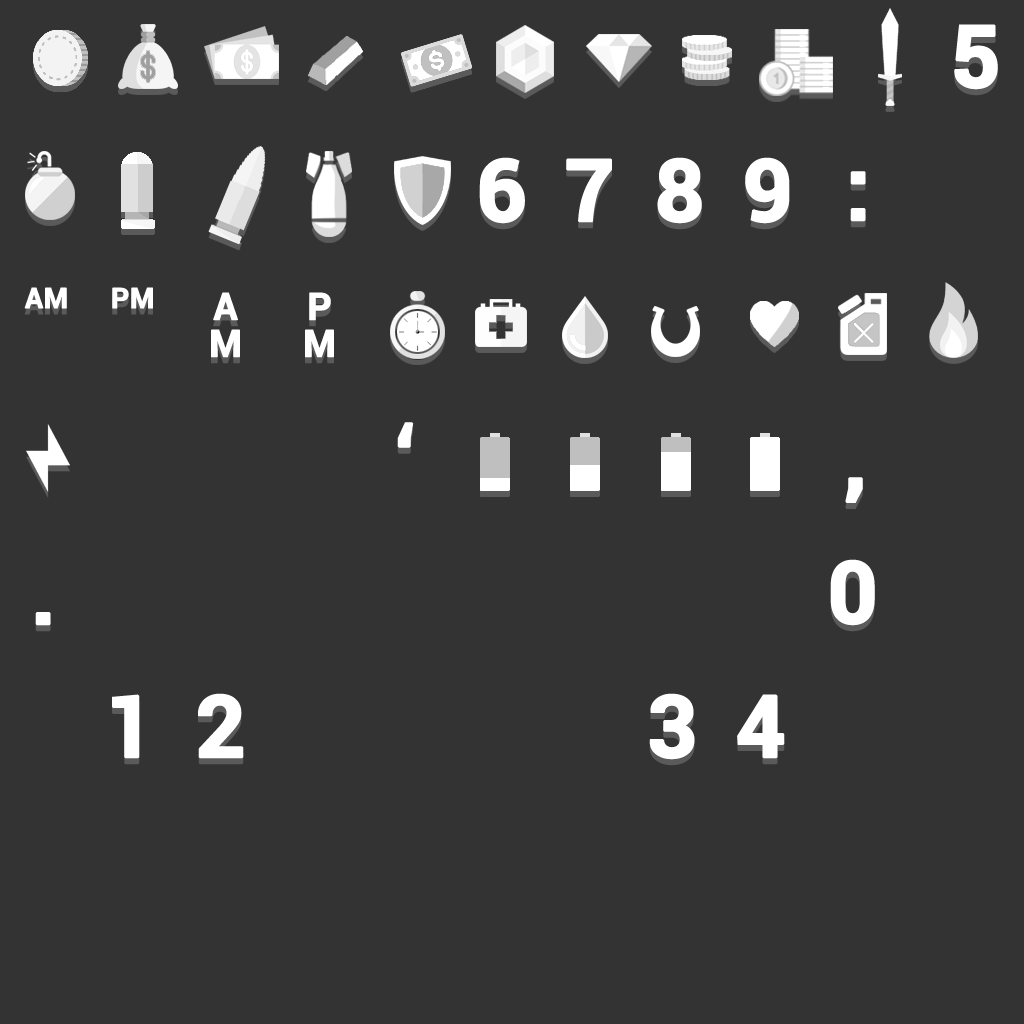
<style>
.page{position:relative;width:1024px;height:1024px;background:#333333}
.page>*{position:absolute;margin:0}
.t1{font:86px "Roboto-Bold";color:#ffffff;font-variant:small-caps;font-weight:bold}
.t2{font:48px "Roboto-Bold";color:#ffffff;font-variant:small-caps;font-weight:bold}
.t3{font:64px/37px "Roboto-Bold";color:#ffffff;font-variant:small-caps;font-weight:bold}
</style>
<div class="page">
<p class="t1" style="left:954px;top:24px;width:44px;height:66px">5</p>
<p class="t1" style="left:479px;top:157px;width:46px;height:67px">6</p>
<p class="t1" style="left:566px;top:158px;width:46px;height:65px">7</p>
<p class="t1" style="left:657px;top:157px;width:45px;height:67px">8</p>
<p class="t1" style="left:745px;top:157px;width:45px;height:67px">9</p>
<p class="t1" style="left:850px;top:171px;width:16px;height:51px">:</p>
<p class="t2" style="left:24px;top:287px;width:43px;height:22px">AM</p>
<p class="t2" style="left:112px;top:287px;width:41px;height:22px">PM</p>
<p class="t3" style="left:211px;top:292px;width:29px;height:66px;text-align:center">A<br>M</p>
<p class="t3" style="left:305px;top:292px;width:29px;height:66px;text-align:center">P<br>M</p>
<p class="t1" style="left:397px;top:422px;width:17px;height:26px">‘</p>
<p class="t1" style="left:845px;top:477px;width:18px;height:26px">,</p>
<p class="t1" style="left:830px;top:559px;width:45px;height:67px">0</p>
<p class="t1" style="left:35px;top:612px;width:16px;height:14px">.</p>
<p class="t1" style="left:112px;top:694px;width:28px;height:65px">1</p>
<p class="t1" style="left:198px;top:693px;width:46px;height:66px">2</p>
<p class="t1" style="left:649px;top:693px;width:46px;height:67px">3</p>
<p class="t1" style="left:737px;top:694px;width:48px;height:65px">4</p>
</div>
